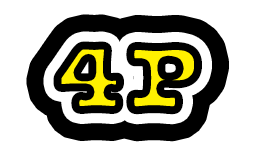
<style>
.page{position:relative;width:256px;height:156px;background:#ffffff}
.page>*{position:absolute;margin:0}
.t1{font:100px "Olivita-Regular";font-weight:bold}
</style>
<div class="page">
<p class="t1" style="left:53px;top:41px;width:149px;height:74px">4P</p>
</div>
